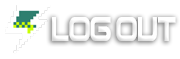
<style>
.page{position:relative;width:180px;height:59px;background:#ffffff}
.page>*{position:absolute;margin:0}
.t1{font:37.2px "TerminatorTwo";color:#fdfdfd;scale:0.72 1}
</style>
<div class="page">
<p class="t1" style="left:52px;top:17px;width:124px;height:24px">LOGOUT</p>
</div>
